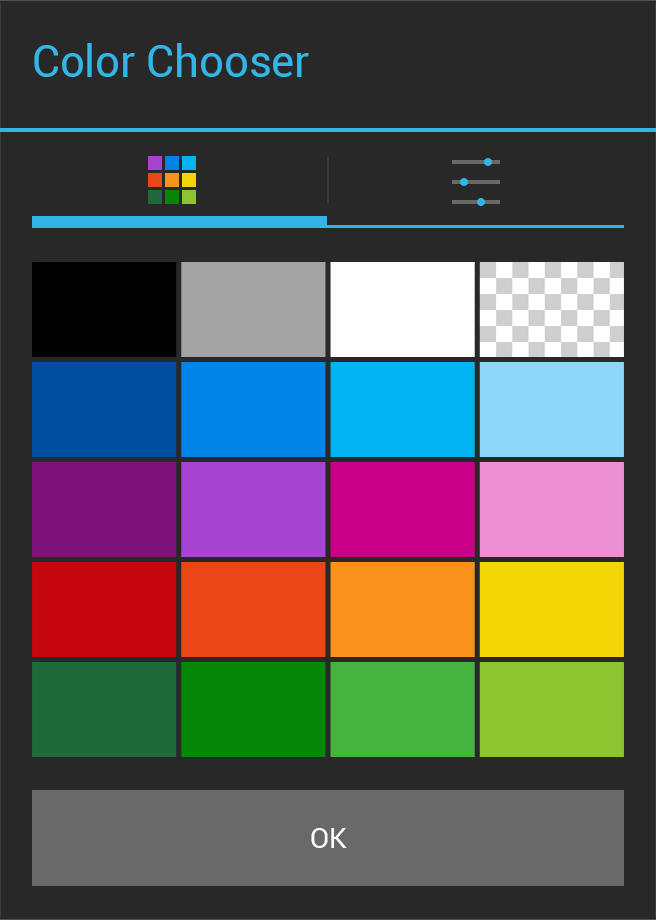
<style>
.page{position:relative;width:656px;height:920px;background:#282828}
.page>*{position:absolute;margin:0}
.t1{font:44.4px "Roboto-Regular";color:#33b5e5}
.t2{font:28.4px "Roboto-Regular";color:#ffffff}
</style>
<div class="page">
<p class="t1" style="left:34px;top:43px;width:275px;height:34px">Color Chooser</p>
<p class="t2" style="left:311px;top:828px;width:36px;height:20px">OK</p>
</div>
